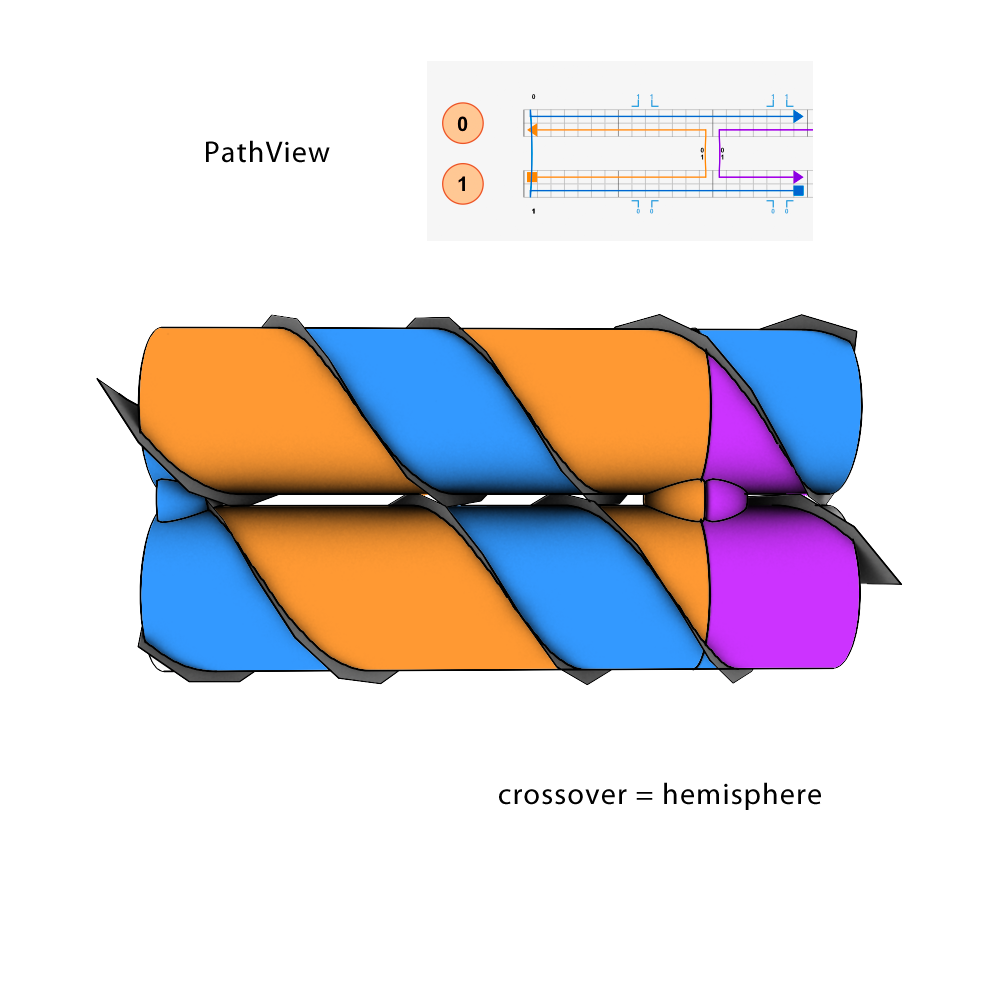
<style>
.page{position:relative;width:1000px;height:1000px;background:#ffffff}
.page>*{position:absolute;margin:0}
.t1{font:30px "MyriadPro-Regular";letter-spacing:0.04em;color:#000000}
</style>
<div class="page">
<p class="t1" style="left:206px;top:140px;width:124px;height:23px">PathView</p>
<p class="t1" style="left:499px;top:782px;width:322px;height:28px">crossover = hemisphere</p>
</div>
